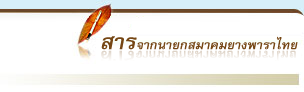
<style>
.page{position:relative;width:304px;height:92px;background:#ffffff}
.page>*{position:absolute;margin:0}
.t1{font:17.2px "FreesiaUPCBoldItalic";color:#754614;scale:1.05 1}
.t2{font:30px "FreesiaUPCBoldItalic";color:#754614;scale:1.05 1}
.t3{font:17.2px "FreesiaUPCBold";scale:1.05 1}
.t4{font:30px "FreesiaUPCBold";scale:1.05 1}
</style>
<div class="page">
<p class="t1" style="left:101px;top:36px;width:197px;height:14px"><span class="t2">สาร</span>จากนายกสมาคมยางพาราไทย</p>
<p class="t3" style="left:101px;top:50px;width:195px;height:14px"><span class="t4">สาร</span>จากนายกสมาคมยางพาราไทย</p>
</div>
